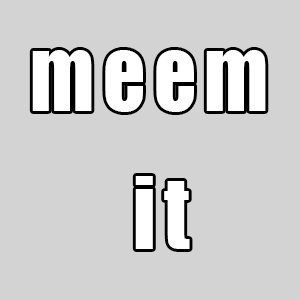
<style>
.page{position:relative;width:300px;height:300px;background:#d3d3d3}
.page>*{position:absolute;margin:0}
.t1{font:22px "Impact";letter-spacing:0.1em;color:#ffffff;scale:0.9 1}
</style>
<div class="page">
<p class="t1" style="left:32px;top:50px;width:234px;height:199px;text-align:center">meem <br><br><br>it</p>
</div>
